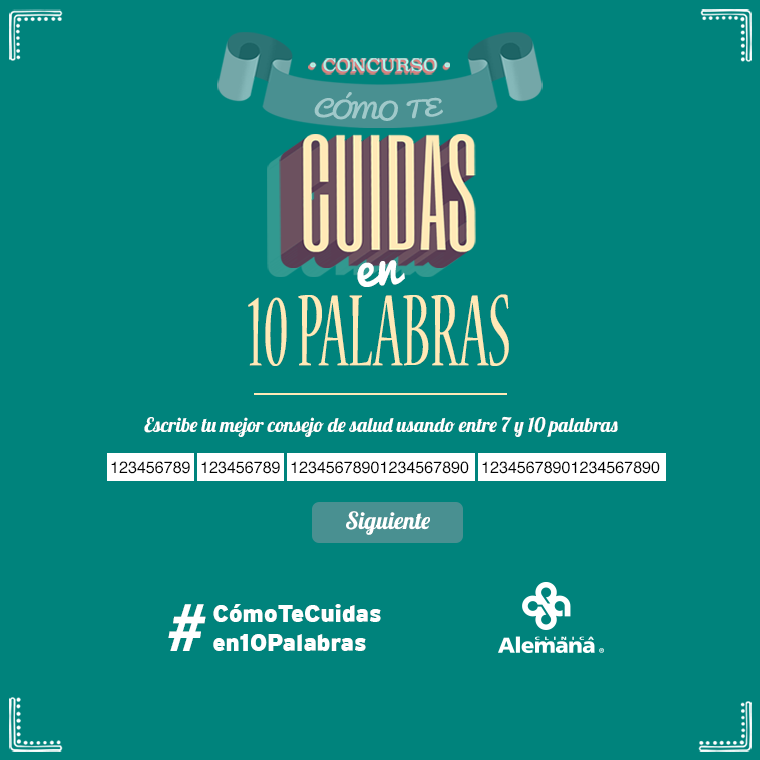
<style>
.page{position:relative;width:760px;height:760px;background:#00837c}
.page>*{position:absolute;margin:0}
.t1{font:20.5px "Pacifico-Regular";color:#a0c9ca;text-transform:uppercase;scale:1.17 1}
.t2{font:52.2px "Pacifico-Regular";letter-spacing:-0.002em;color:#ffffff}
.t3{font:112.8px "NuevaStd-Cond";letter-spacing:-0.002em;color:#ffe9b7;scale:0.6 1}
.t4{font:20px "Lobster-Regular";letter-spacing:-0.002em;color:#ffffff}
.t5{font:16.1px "Helvetica";letter-spacing:-0.002em;color:#000000}
.t6{font:23.5px "Lobster-Regular";letter-spacing:-0.002em;color:#ffffff}
.t7{font:72px "MyriadPro-BoldIt";color:#ffffff}
.t8{font:24.2px "Interstate-Black";color:#ffffff}
</style>
<div class="page">
<p class="t1" style="left:314px;top:92px;width:129px;height:29px">cómo te</p>
<p class="t2" style="left:357px;top:260px;width:48px;height:27px;rotate:-4deg">en</p>
<p class="t3" style="left:248px;top:294px;width:261px;height:72px">10 PALABRAS</p>
<p class="t4" style="left:144px;top:416px;width:474px;height:21px">Escribe tu mejor consejo de salud usando entre 7 y 10 palabras</p>
<p class="t5" style="left:111px;top:461px;width:79px;height:13px">123456789</p>
<p class="t5" style="left:201px;top:461px;width:79px;height:13px">123456789</p>
<p class="t5" style="left:291px;top:461px;width:178px;height:13px">12345678901234567890</p>
<p class="t5" style="left:482px;top:461px;width:178px;height:13px">12345678901234567890</p>
<p class="t6" style="left:346px;top:511px;width:84px;height:24px">Siguiente</p>
<p class="t7" style="left:168px;top:604px;width:38px;height:47px">#</p>
<p class="t8" style="left:213px;top:604px;width:168px;height:47px">CómoTeCuidas<br>en10Palabras</p>
</div>
